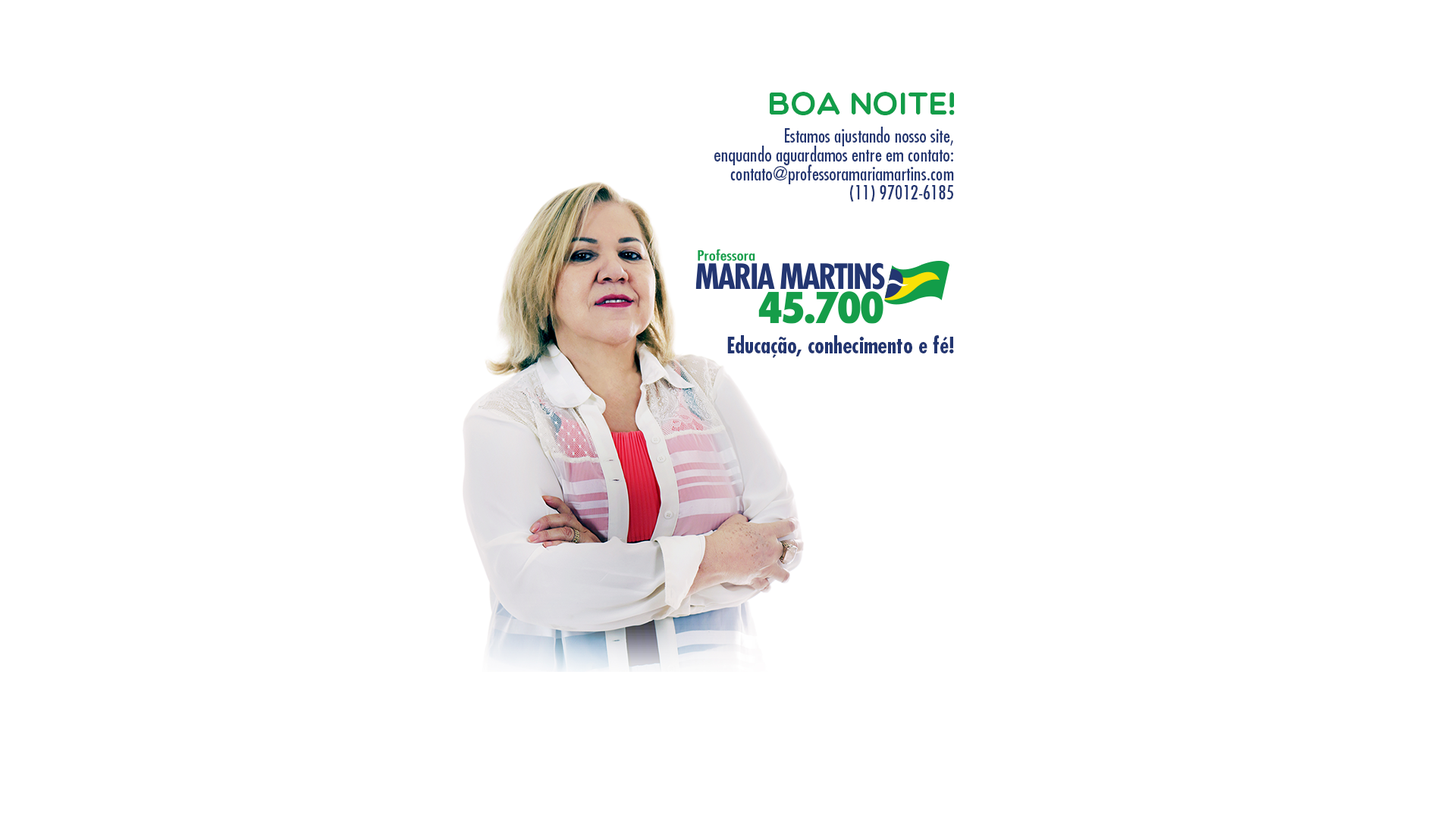
<style>
.page{position:relative;width:1456px;height:819px;background:#ffffff}
.page>*{position:absolute;margin:0}
.t1{font:31.6px "Multicolore";color:#129d49;text-transform:uppercase}
.t2{font:19px/19px "FuturaStd-Condensed";color:#233671}
.t3{font:22.1px "FuturaStd-CondensedBold";color:#233671}
</style>
<div class="page">
<p class="t1" style="left:770px;top:92px;width:185px;height:23px">boa noite!</p>
<p class="t2" style="left:714px;top:127px;width:240px;height:75px;text-align:right">Estamos ajustando nosso site,<br>enquando aguardamos entre em contato:<br>contato@professoramariamartins.com<br>(11) 97012-6185</p>
<p class="t3" style="left:727px;top:335px;width:227px;height:23px">Educação, conhecimento e fé!</p>
</div>
